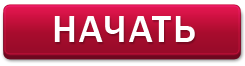
<style>
.page{position:relative;width:245px;height:66px}
.page>*{position:absolute;margin:0}
.t1{font:39px "FranklinGothic-Medium";letter-spacing:0.05em;color:#ffffff;text-transform:uppercase}
</style>
<div class="page">
<p class="t1" style="left:54px;top:16px;width:141px;height:26px">Начать</p>
</div>
